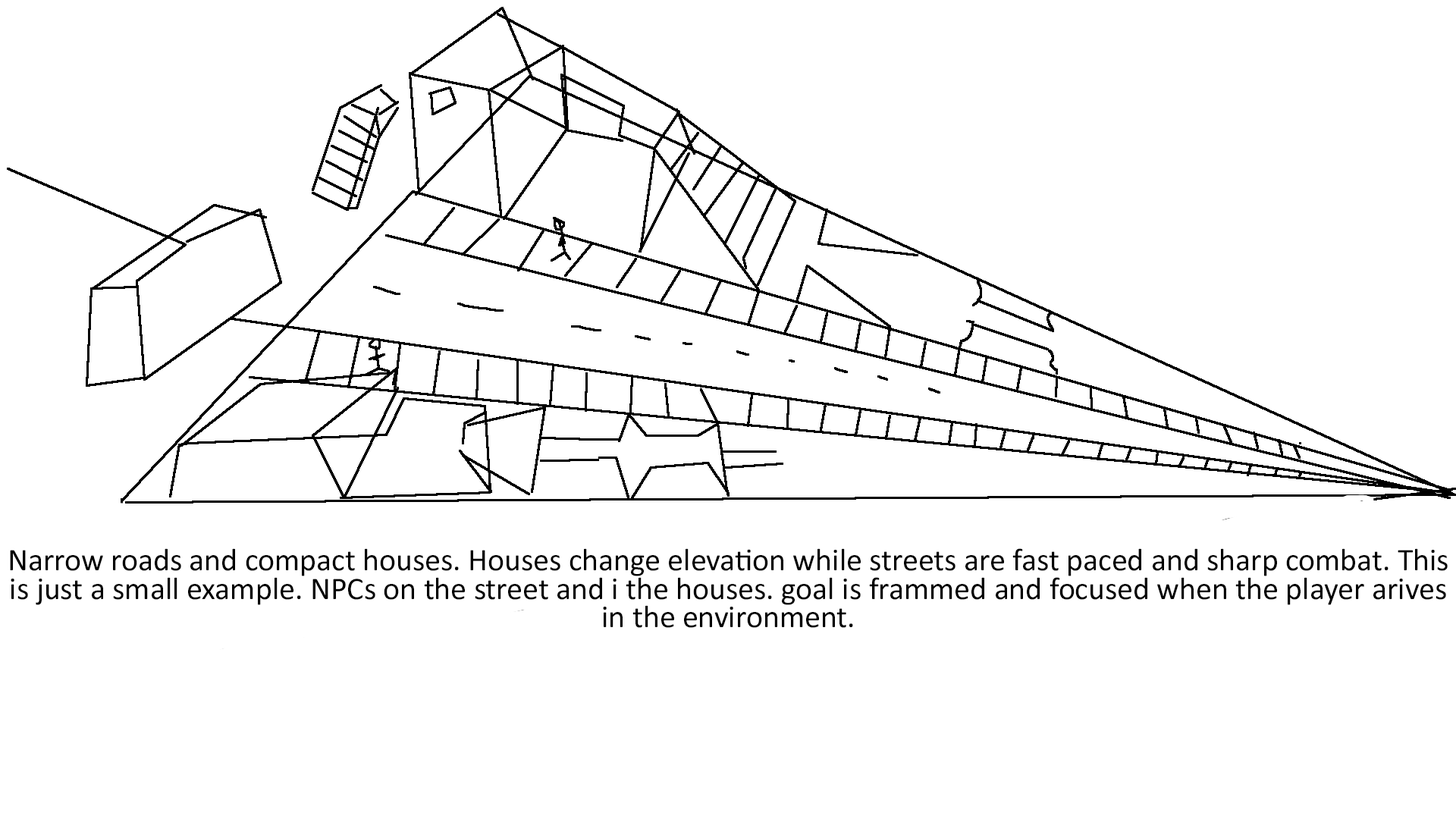
<style>
.page{position:relative;width:1456px;height:819px;background:#ffffff}
.page>*{position:absolute;margin:0}
.t1{font:31.6px/28.4px "Calibri";color:#000000}
</style>
<div class="page">
<p class="t1" style="left:10px;top:548px;width:1438px;height:80px;text-align:center">Narrow roads and compact houses. Houses change elevation while streets are fast paced and sharp combat. This is just a small example. NPCs on the street and i the houses. goal is frammed and focused when the player arives in the environment.</p>
</div>
